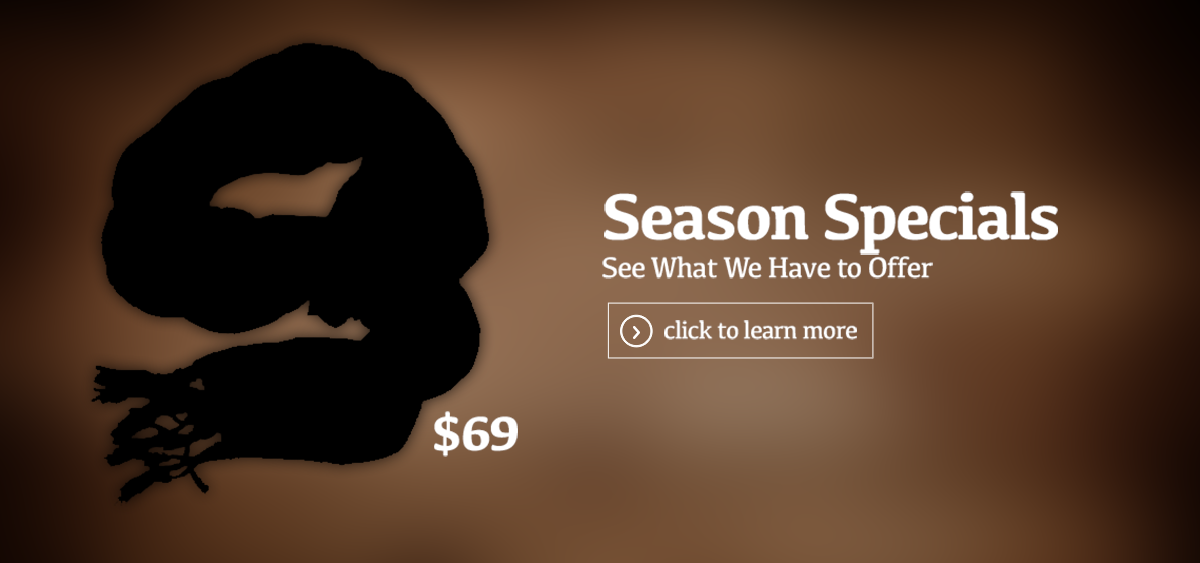
<style>
.page{position:relative;width:1200px;height:563px}
.page>*{position:absolute;margin:0}
.t1{font:67.5px "Kefa-Bold";letter-spacing:-0.04em;color:#ffffff}
.t2{font:29.5px "Kefa-Regular";letter-spacing:-0.04em;color:#ffffff}
.t3{font:25.3px "Kefa-Regular";letter-spacing:-0.04em;color:#ffffff}
.t4{font:49.5px "Kefa-Bold";letter-spacing:-0.04em;color:#ffffff}
</style>
<div class="page">
<p class="t1" style="left:604px;top:191px;width:454px;height:64px">Season Specials</p>
<p class="t2" style="left:602px;top:256px;width:331px;height:23px">See What We Have to Offer</p>
<p class="t3" style="left:664px;top:320px;width:193px;height:20px">click to learn more</p>
<p class="t4" style="left:434px;top:411px;width:84px;height:46px">$69</p>
</div>
